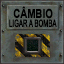
<style>
.page{position:relative;width:64px;height:64px}
.page>*{position:absolute;margin:0}
.t1{font:12.2px "Arial-BoldMT";color:#000000;font-weight:bold;scale:0.77 1}
.t2{font:9.9px "ArialMT";color:#000000;font-weight:bold;scale:0.6 1}
</style>
<div class="page">
<p class="t1" style="left:13px;top:6px;width:40px;height:13px">CÂMBIO</p>
<p class="t2" style="left:9px;top:19px;width:48px;height:9px">LIGAR A BOMBA</p>
</div>
